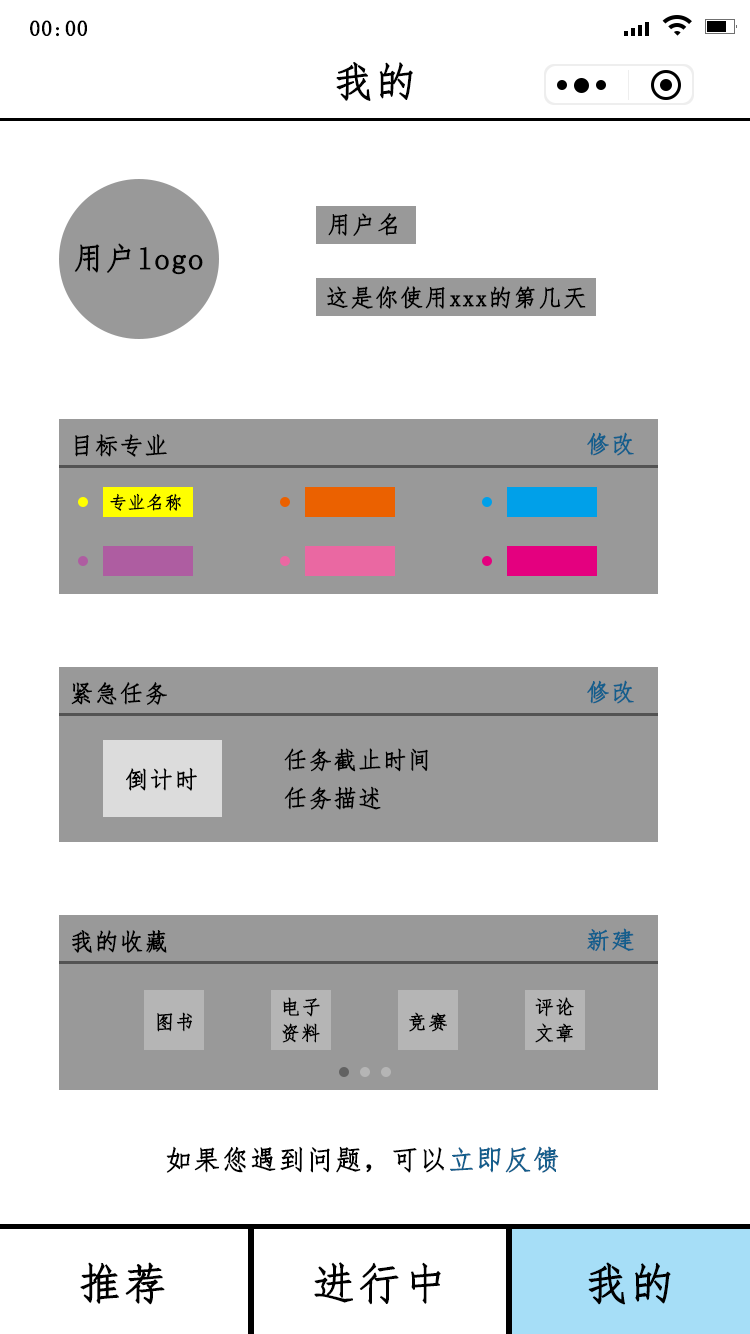
<style>
.page{position:relative;width:750px;height:1334px;background:#ffffff}
.page>*{position:absolute;margin:0}
.t1{font:21.7px "FangSong";letter-spacing:0.02em;color:#000000;font-weight:bold}
.t2{font:40.7px "FangSong";letter-spacing:0.02em;color:#000000;font-weight:bold}
.t3{font:23.7px "FangSong";letter-spacing:0.02em;color:#000000;font-weight:bold}
.t4{font:30.7px "FangSong";letter-spacing:0.02em;color:#000000;font-weight:bold}
.t5{font:23.7px "FangSong";letter-spacing:0.02em;color:#145e8c;font-weight:bold}
.t6{font:17.7px "FangSong";letter-spacing:0.02em;color:#000000;font-weight:bold}
.t7{font:19.7px/26px "FangSong";letter-spacing:0.02em;color:#000000;font-weight:bold}
.t8{font:19.7px "FangSong";letter-spacing:0.02em;color:#000000;font-weight:bold}
.t9{font:27px "FangSong";letter-spacing:0.02em;color:#000000;font-weight:bold}
.t10{font:27px "FangSong";letter-spacing:0.02em;color:#145e8c;font-weight:bold}
.t11{font:43.7px "FangSong";letter-spacing:0.02em;color:#000000;font-weight:bold}
</style>
<div class="page">
<p class="t1" style="left:30px;top:20px;width:57px;height:17px">00:00</p>
<p class="t2" style="left:336px;top:62px;width:77px;height:39px">我的</p>
<p class="t3" style="left:328px;top:213px;width:69px;height:23px">用户名</p>
<p class="t4" style="left:74px;top:243px;width:129px;height:32px">用户logo</p>
<p class="t3" style="left:327px;top:286px;width:259px;height:23px">这是你使用xxx的第几天</p>
<p class="t3" style="left:75px;top:434px;width:92px;height:23px">目标专业</p>
<p class="t5" style="left:587px;top:432px;width:47px;height:24px">修改</p>
<p class="t6" style="left:110px;top:493px;width:71px;height:18px">专业名称</p>
<p class="t3" style="left:71px;top:682px;width:96px;height:23px">紧急任务</p>
<p class="t5" style="left:587px;top:680px;width:47px;height:24px">修改</p>
<p class="t3" style="left:284px;top:748px;width:144px;height:24px">任务截止时间</p>
<p class="t3" style="left:126px;top:767px;width:71px;height:24px">倒计时</p>
<p class="t3" style="left:284px;top:786px;width:97px;height:24px">任务描述</p>
<p class="t5" style="left:587px;top:928px;width:47px;height:24px">新建</p>
<p class="t3" style="left:72px;top:930px;width:95px;height:23px">我的收藏</p>
<p class="t7" style="left:282px;top:997px;width:38px;height:46px">电子<br>资料</p>
<p class="t7" style="left:535px;top:997px;width:39px;height:46px">评论<br>文章</p>
<p class="t8" style="left:157px;top:1012px;width:35px;height:20px">图书</p>
<p class="t8" style="left:409px;top:1012px;width:38px;height:20px">竞赛</p>
<p class="t9" style="left:166px;top:1146px;width:393px;height:27px">如果您遇到问题，可以<span class="t10">立即反馈</span></p>
<p class="t11" style="left:80px;top:1262px;width:85px;height:43px">推荐</p>
<p class="t11" style="left:314px;top:1262px;width:127px;height:43px">进行中</p>
<p class="t11" style="left:588px;top:1262px;width:83px;height:43px">我的</p>
</div>
